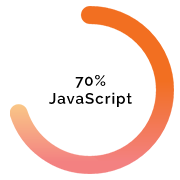
<style>
.page{position:relative;width:180px;height:180px;background:#ffffff}
.page>*{position:absolute;margin:0}
.t1{font:15px "Raleway-SemiBold";letter-spacing:0.07em;color:#000000}
</style>
<div class="page">
<p class="t1" style="left:49px;top:75px;width:83px;height:32px;text-align:center">70%<br>JavaScript</p>
</div>
